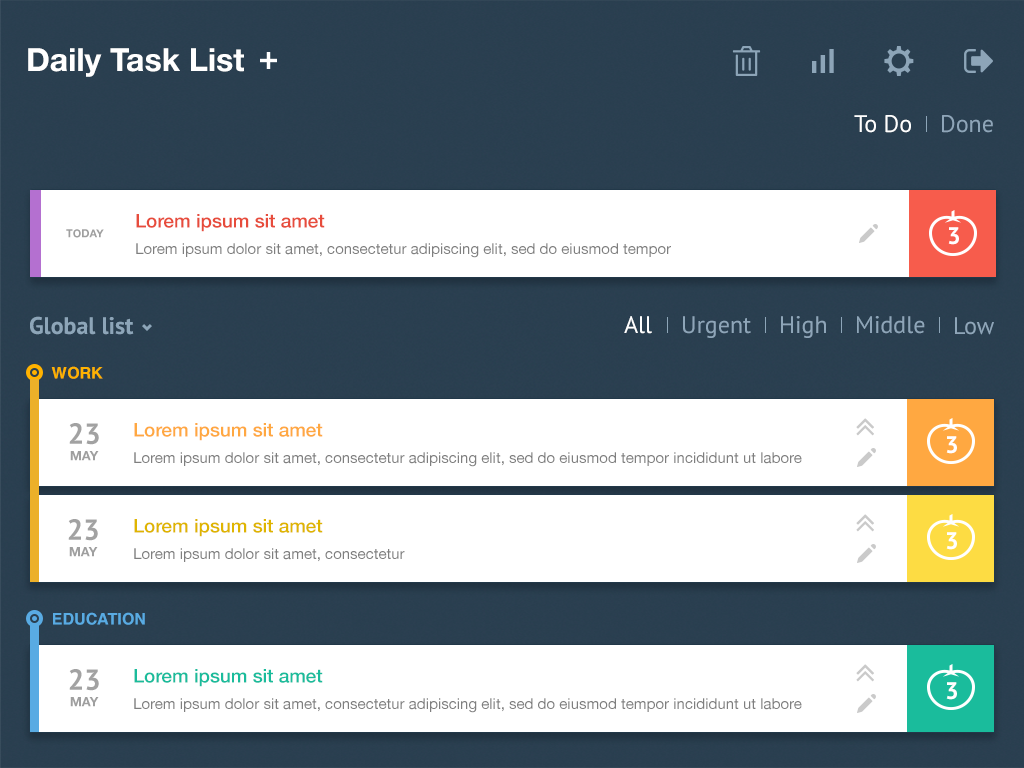
<style>
.page{position:relative;width:1024px;height:768px;background:#ffffff}
.page>*{position:absolute;margin:0}
.t1{font:32px "HelveticaNeue-Bold";color:#ffffff}
.t2{font:24px "PTSans-Regular";color:#ffffff}
.t3{font:24px "PTSans-Regular";color:#8ea5b8}
.t4{font:19px "HelveticaNeue-Medium";color:#e74c3c}
.t5{font:11px "HelveticaNeue-Bold";color:#9f9f9f}
.t6{font:24px "PTSans-Bold";color:#ffffff}
.t7{font:15px "HelveticaNeue";color:#7f7f7f}
.t8{font:24px "PTSans-Bold";color:#8da5b8}
.t9{font:16px "Helvetica-Bold";color:#ffb200}
.t10{font:29px "PTSans-Bold";color:#a2a2a2}
.t11{font:19px "HelveticaNeue-Medium";color:#ffa841}
.t12{font:13px "HelveticaNeue-Bold";color:#9f9f9f}
.t13{font:19px "HelveticaNeue-Medium";color:#dfb500}
.t14{font:16px "Helvetica-Bold";color:#59abe3}
.t15{font:19px "HelveticaNeue-Medium";color:#1abc9c}
</style>
<div class="page">
<p class="t1" style="left:28px;top:48px;width:216px;height:29px">Daily Task List</p>
<p class="t2" style="left:854px;top:115px;width:57px;height:18px">To Do</p>
<p class="t3" style="left:942px;top:115px;width:51px;height:18px">Done</p>
<p class="t4" style="left:136px;top:214px;width:189px;height:18px">Lorem ipsum sit amet</p>
<p class="t5" style="left:66px;top:229px;width:38px;height:9px">TODAY</p>
<p class="t6" style="left:948px;top:227px;width:11px;height:18px">3</p>
<p class="t7" style="left:136px;top:243px;width:535px;height:15px">Lorem ipsum dolor sit amet, consectetur adipiscing elit, sed do eiusmod tempor</p>
<p class="t8" style="left:30px;top:316px;width:104px;height:19px">Global list</p>
<p class="t2" style="left:624px;top:316px;width:28px;height:18px">All</p>
<p class="t3" style="left:683px;top:316px;width:68px;height:22px">Urgent</p>
<p class="t3" style="left:781px;top:316px;width:45px;height:22px">High</p>
<p class="t3" style="left:857px;top:316px;width:68px;height:18px">Middle</p>
<p class="t3" style="left:955px;top:317px;width:39px;height:18px">Low</p>
<p class="t9" style="left:51px;top:366px;width:52px;height:13px">WORK</p>
<p class="t10" style="left:69px;top:423px;width:30px;height:22px">23</p>
<p class="t11" style="left:134px;top:423px;width:189px;height:18px">Lorem ipsum sit amet</p>
<p class="t6" style="left:946px;top:436px;width:11px;height:18px">3</p>
<p class="t12" style="left:70px;top:451px;width:29px;height:10px">MAY</p>
<p class="t7" style="left:134px;top:452px;width:668px;height:15px">Lorem ipsum dolor sit amet, consectetur adipiscing elit, sed do eiusmod tempor incididunt ut labore</p>
<p class="t10" style="left:68px;top:519px;width:30px;height:22px">23</p>
<p class="t13" style="left:134px;top:519px;width:189px;height:18px">Lorem ipsum sit amet</p>
<p class="t6" style="left:946px;top:532px;width:11px;height:18px">3</p>
<p class="t12" style="left:69px;top:547px;width:29px;height:10px">MAY</p>
<p class="t7" style="left:134px;top:548px;width:271px;height:14px">Lorem ipsum dolor sit amet, consectetur</p>
<p class="t14" style="left:53px;top:612px;width:92px;height:13px">EDUCATION</p>
<p class="t10" style="left:69px;top:669px;width:30px;height:22px">23</p>
<p class="t15" style="left:134px;top:669px;width:189px;height:18px">Lorem ipsum sit amet</p>
<p class="t6" style="left:946px;top:682px;width:11px;height:18px">3</p>
<p class="t12" style="left:70px;top:697px;width:29px;height:10px">MAY</p>
<p class="t7" style="left:134px;top:698px;width:668px;height:15px">Lorem ipsum dolor sit amet, consectetur adipiscing elit, sed do eiusmod tempor incididunt ut labore</p>
</div>
